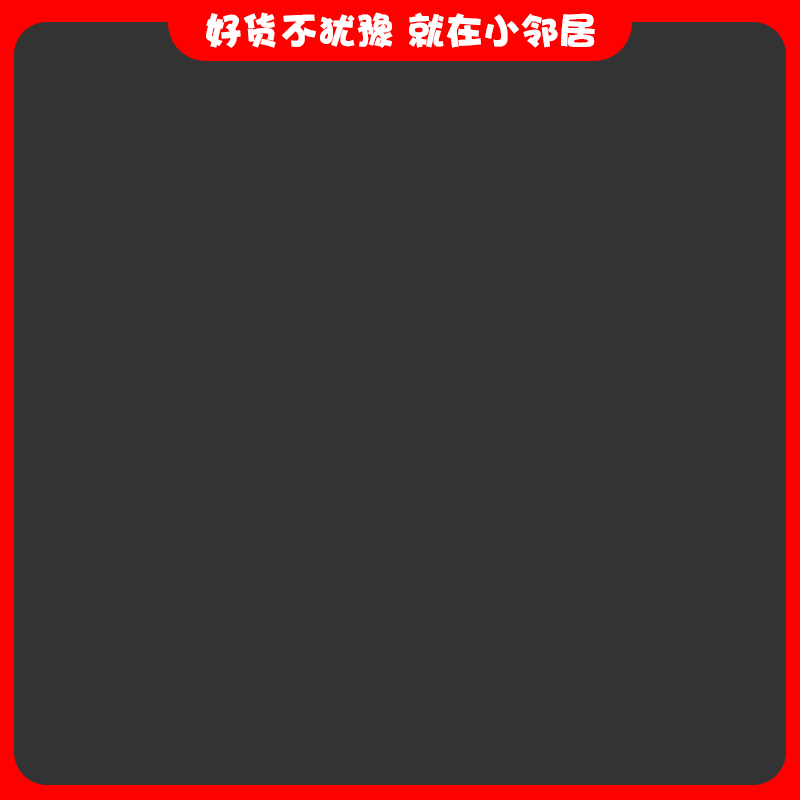
<style>
.page{position:relative;width:800px;height:800px;background:#333333}
.page>*{position:absolute;margin:0}
.t1{font:38px "DFPHaiBaoW12";color:#ffffff}
</style>
<div class="page">
<p class="t1" style="left:206px;top:12px;width:389px;height:36px">好货不犹豫 就在小邻居</p>
</div>
